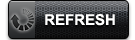
<style>
.page{position:relative;width:135px;height:40px}
.page>*{position:absolute;margin:0}
.t1{font:15px "Arial-BoldMT";color:#ffffff;text-transform:uppercase}
</style>
<div class="page">
<p class="t1" style="left:45px;top:14px;width:70px;height:12px">Refresh</p>
</div>
